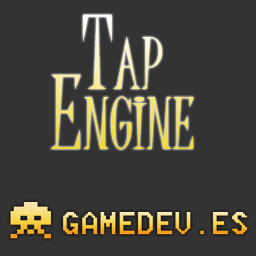
<style>
.page{position:relative;width:256px;height:256px;background:#333333}
.page>*{position:absolute;margin:0}
.t1{font:100px/60px "JuiceITC-Regular";font-variant:small-caps}
</style>
<div class="page">
<p class="t1" style="left:50px;top:14px;width:144px;height:136px;text-align:center">Tap<br>Engine</p>
</div>
